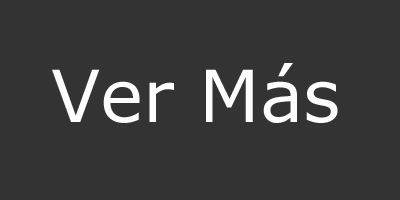
<style>
.page{position:relative;width:400px;height:200px;background:#333333}
.page>*{position:absolute;margin:0}
.t1{font:72px "MSReferenceSansSerif";color:#fefefe}
</style>
<div class="page">
<p class="t1" style="left:52px;top:63px;width:286px;height:60px">Ver Más</p>
</div>
